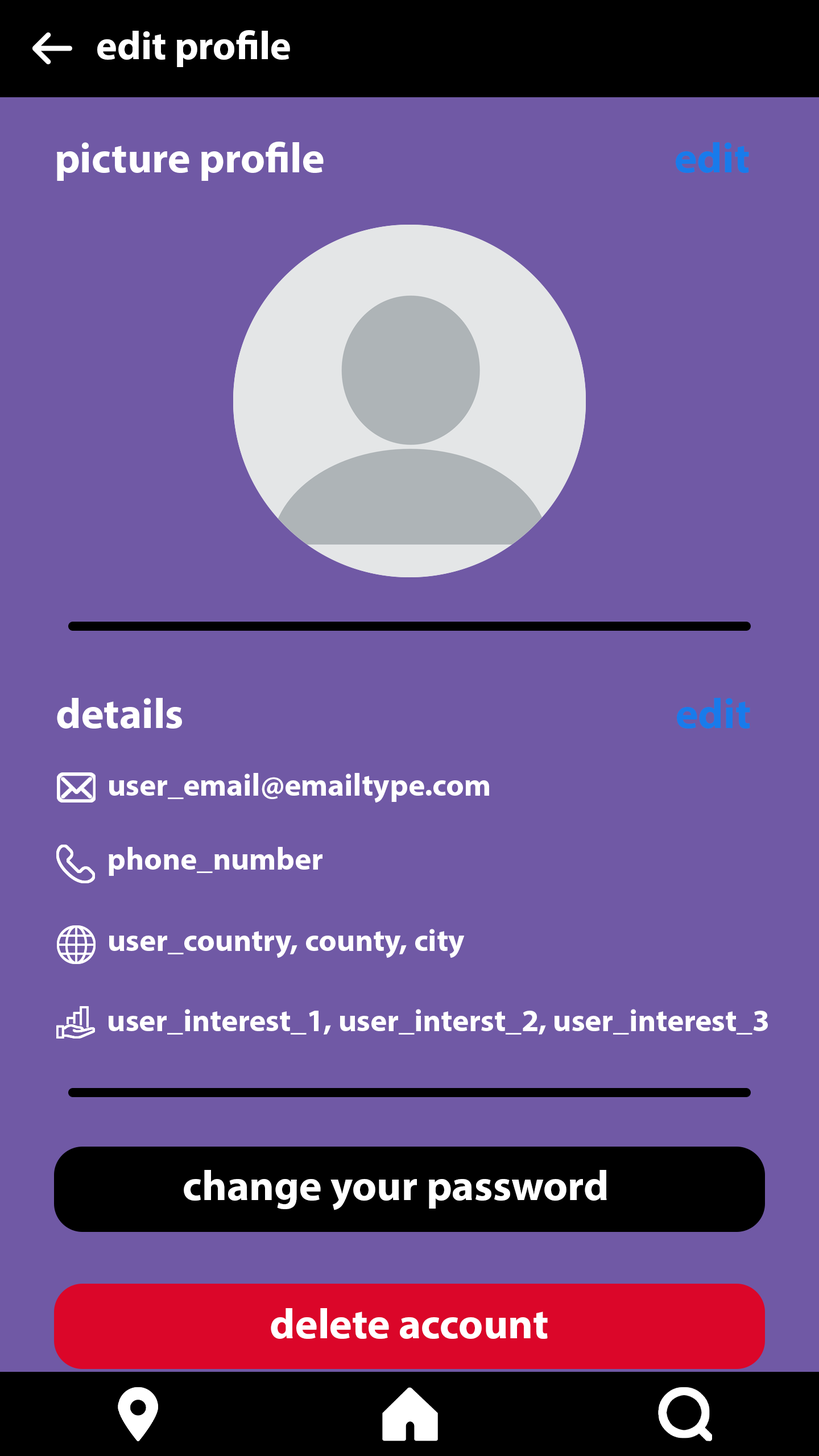
<style>
.page{position:relative;width:819px;height:1456px;background:#7059a5}
.page>*{position:absolute;margin:0}
.t1{font:39.8px "MyriadPro-Bold";color:#ffffff}
.t2{font:42.7px "MyriadPro-Bold";color:#ffffff}
.t3{font:42.7px "MyriadPro-Bold";color:#187beb}
.t4{font:31.3px "MyriadPro-Bold";color:#ffffff}
</style>
<div class="page">
<p class="t1" style="left:97px;top:30px;width:193px;height:37px">edit profile</p>
<p class="t2" style="left:57px;top:142px;width:267px;height:39px">picture profile</p>
<p class="t3" style="left:676px;top:142px;width:73px;height:31px">edit</p>
<p class="t2" style="left:57px;top:698px;width:125px;height:31px">details</p>
<p class="t3" style="left:677px;top:698px;width:73px;height:31px">edit</p>
<p class="t4" style="left:109px;top:773px;width:380px;height:29px">user_email@emailtype.com</p>
<p class="t4" style="left:109px;top:847px;width:213px;height:29px">phone_number</p>
<p class="t4" style="left:109px;top:929px;width:356px;height:29px">user_country, county, city</p>
<p class="t4" style="left:109px;top:1009px;width:659px;height:26px">user_interest_1, user_interst_2, user_interest_3</p>
<p class="t2" style="left:271px;top:1308px;width:277px;height:31px">delete account</p>
</div>
